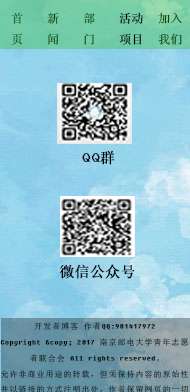
<style>
.page{position:relative;width:190px;height:392px}
.page>*{position:absolute;margin:0}
.t1{font:12px "System"}
.t2{font:12px "System";color:#10410b}
.t3{font:12px "System";color:#000000}
.t4{font:15px "System";color:#000000}
.t5{font:9px "Fixedsys";color:#000000}
</style>
<div class="page">
<p class="t1" style="left:11px;top:12px;width:12px;height:33px">首<br>页</p>
<p class="t2" style="left:47px;top:12px;width:12px;height:33px">新闻</p>
<p class="t1" style="left:83px;top:12px;width:12px;height:33px">部门</p>
<p class="t3" style="left:119px;top:12px;width:24px;height:33px">活动<br>项目</p>
<p class="t2" style="left:158px;top:12px;width:24px;height:33px">加入<br>我们</p>
<p class="t4" style="left:82px;top:150px;width:33px;height:15px">QQ群</p>
<p class="t4" style="left:59px;top:264px;width:76px;height:15px">微信公众号</p>
<p class="t5" style="left:0px;top:322px;width:189px;height:71px;text-align:center">开发者博客 作者QQ:981417972<br>Copyright &amp;copy; 2017 南京邮电大学青年志愿者联合会 All rights reserved.<br>允许非商业用途的转载，但须保持内容的原始性并以链接的方式注明出处，作者保留网页的一切权利</p>
</div>
